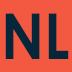
<style>
.page{position:relative;width:72px;height:72px;background:#f35941}
.page>*{position:absolute;margin:0}
.t1{font:63.4px "CenturyGothic-Bold";color:#062739;scale:0.93 1}
</style>
<div class="page">
<p class="t1" style="left:5px;top:13px;width:64px;height:46px">NL</p>
</div>
